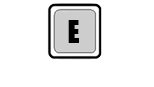
<style>
.page{position:relative;width:154px;height:87px;background:#ffffff}
.page>*{position:absolute;margin:0}
.t1{font:29.3px "Impact";color:#000000}
</style>
<div class="page">
<p class="t1" style="left:68px;top:20px;width:11px;height:23px">E</p>
</div>
